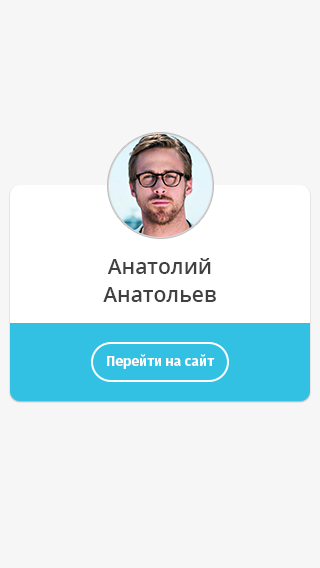
<style>
.page{position:relative;width:320px;height:568px;background:#f6f6f6}
.page>*{position:absolute;margin:0}
.t1{font:21px/28px "OpenSans-Semibold";color:#414141}
.t2{font:14px "FiraSans-Bold";color:#ffffff}
</style>
<div class="page">
<p class="t1" style="left:103px;top:258px;width:113px;height:44px;text-align:center">Анатолий<br>Анатольев</p>
<p class="t2" style="left:107px;top:354px;width:108px;height:15px">Перейти на сайт</p>
</div>
